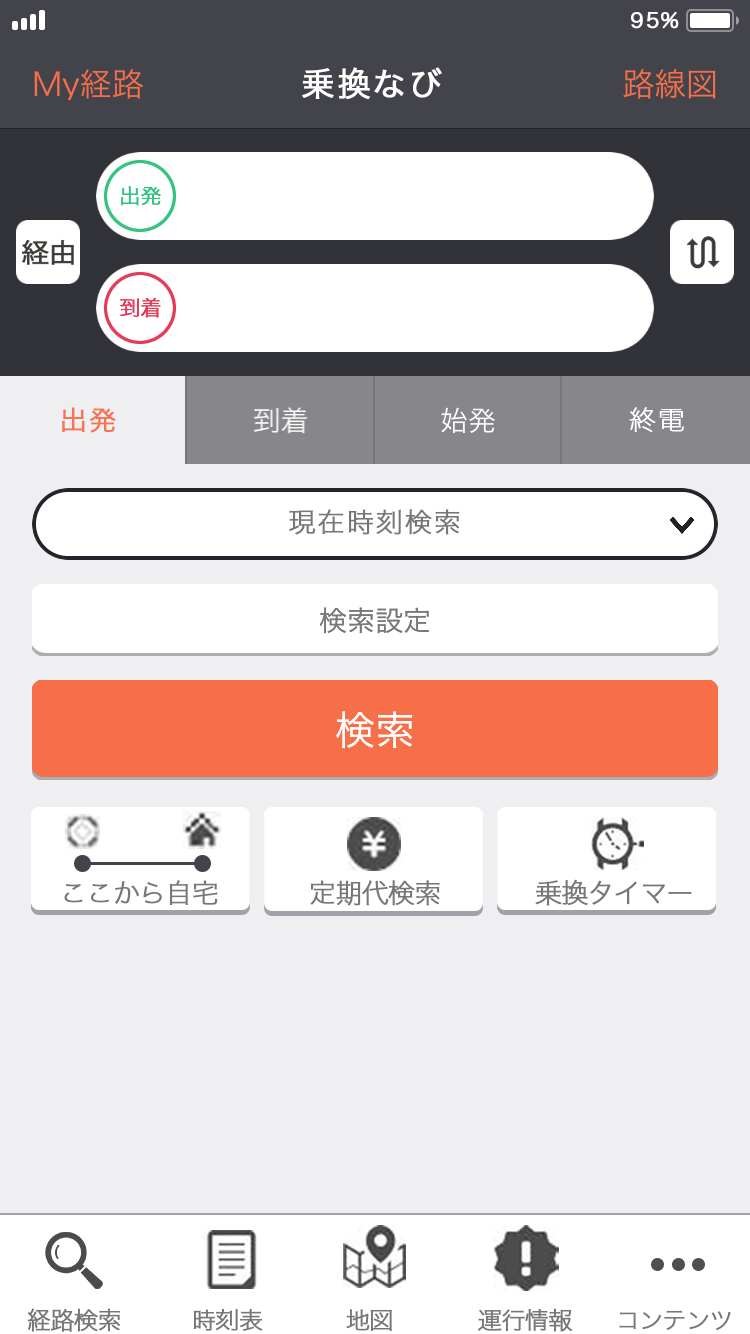
<style>
.page{position:relative;width:750px;height:1334px;background:#efeff2}
.page>*{position:absolute;margin:0}
.t1{font:20.7px "HiraginoSans-W3";letter-spacing:0.05em;color:#ffffff;font-weight:bold}
.t2{font:33px "HiraginoSans-W3";letter-spacing:0.05em;color:#ffffff;font-weight:bold}
.t3{font:27px "HiraginoSans-W2";letter-spacing:0.05em;color:#f77450;font-weight:bold}
.t4{font:27px "HiraginoSans-W0";letter-spacing:0.05em;color:#ffffff;font-weight:bold}
.t5{font:27px "HiraginoSans-W1";letter-spacing:0.05em;color:#777777;font-weight:bold}
.t6{font:27px "HiraginoSans-W1";letter-spacing:-0.05em;color:#777777;font-weight:bold}
.t7{font:24px "HiraginoSans-W1";letter-spacing:-0.05em;color:#777777;font-weight:bold}
</style>
<div class="page">
<p class="t1" style="left:631px;top:11px;width:48px;height:18px">95%</p>
<p class="t2" style="left:302px;top:67px;width:140px;height:33px">乗換なび</p>
<p class="t3" style="left:62px;top:407px;width:54px;height:26px">出発</p>
<p class="t4" style="left:629px;top:407px;width:55px;height:25px">終電</p>
<p class="t5" style="left:289px;top:509px;width:171px;height:26px">現在時刻検索</p>
<p class="t6" style="left:64px;top:880px;width:154px;height:25px">ここから自宅</p>
<p class="t6" style="left:310px;top:880px;width:130px;height:26px">定期代検索</p>
<p class="t6" style="left:535px;top:879px;width:157px;height:27px">乗換タイマー</p>
<p class="t7" style="left:27px;top:1308px;width:93px;height:24px">経路検索</p>
<p class="t7" style="left:193px;top:1309px;width:70px;height:22px">時刻表</p>
<p class="t7" style="left:346px;top:1309px;width:46px;height:22px">地図</p>
<p class="t7" style="left:478px;top:1308px;width:95px;height:24px">運行情報</p>
<p class="t7" style="left:619px;top:1310px;width:112px;height:21px">コンテンツ</p>
</div>
